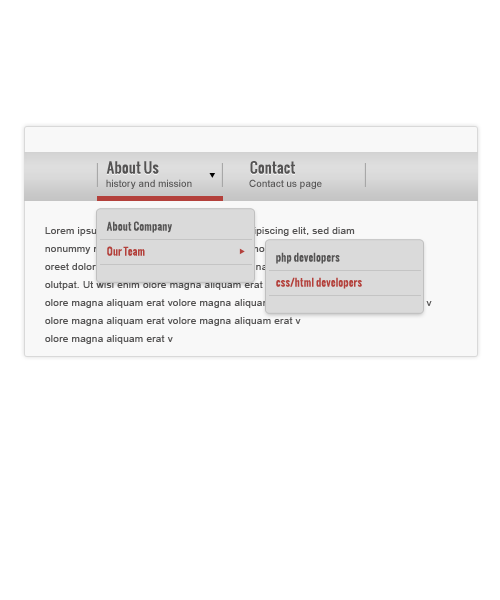
<style>
.page{position:relative;width:500px;height:600px;background:#ffffff}
.page>*{position:absolute;margin:0}
.t1{font:14px "Oswald";letter-spacing:0.025em;color:#555454}
.t2{font:10px "ArialMT";color:#555454}
.t3{font:10px "Oswald";letter-spacing:0.025em;color:#555454}
.t4{font:10px/18px "ArialMT";letter-spacing:0.025em}
.t5{font:10px "Oswald";letter-spacing:0.025em;color:#b3403b}
</style>
<div class="page">
<p class="t1" style="left:106px;top:161px;width:53px;height:13px">About Us</p>
<p class="t1" style="left:250px;top:161px;width:45px;height:13px">Contact</p>
<p class="t2" style="left:106px;top:179px;width:86px;height:10px">history and mission</p>
<p class="t2" style="left:249px;top:179px;width:73px;height:10px">Contact us page</p>
<p class="t3" style="left:106px;top:221px;width:66px;height:12px">About Company</p>
<p class="t4" style="left:45px;top:227px;width:387px;height:117px">Lorem ipsum dolor sit amet, consectetuer adipiscing elit, sed diam <br>nonummy nibh euismod nonummy nibh euismod tincidunt ut latincidunt ut la<br>oreet dolore magna aliquam erat v olore magna aliquam erat v olore magna aliqu<br>olutpat. Ut wisi enim olore magna aliquam erat v olore magna aliquam erat v<br>olore magna aliquam erat volore magna aliquam erat v olore magna aliquam erat v<br>olore magna aliquam erat volore magna aliquam erat v<br>olore magna aliquam erat v</p>
<p class="t5" style="left:107px;top:246px;width:38px;height:10px">Our Team</p>
<p class="t3" style="left:276px;top:252px;width:64px;height:12px">php developers</p>
<p class="t5" style="left:276px;top:277px;width:86px;height:12px">css/html developers</p>
</div>
